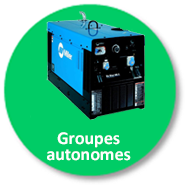
<style>
.page{position:relative;width:185px;height:185px;background:#00cc66}
.page>*{position:absolute;margin:0}
.t1{font:18px/16px "Calibri-Bold";color:#ffffff}
</style>
<div class="page">
<p class="t1" style="left:47px;top:132px;width:84px;height:29px;text-align:center">Groupes <br>autonomes</p>
</div>
